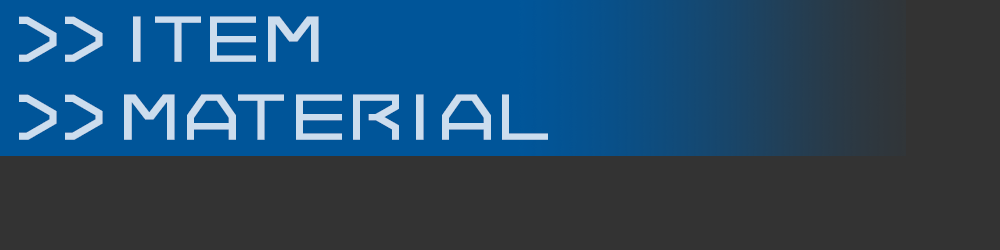
<style>
.page{position:relative;width:1000px;height:250px;background:#333333}
.page>*{position:absolute;margin:0}
.t1{font:65px/78px "7THDR2020ThinRegular";letter-spacing:0.055em;color:#ccddee;text-transform:uppercase}
.t2{font:51px/78px "7THDR2020ThinRegular";letter-spacing:0.105em;color:#ccddee;text-transform:uppercase;font-weight:bold}
.t3{font:51px/78px "7THDR2020ThinRegular";letter-spacing:0.055em;color:#ccddee;text-transform:uppercase;font-weight:bold}
.t4{font:51px/78px "7THDR2020ThinRegular";letter-spacing:0.115em;color:#ccddee;text-transform:uppercase;font-weight:bold}
.t5{font:51px/78px "7THDR2020ThinRegular";letter-spacing:0.055em;color:#ccddee;text-transform:uppercase;font-weight:bold;scale:1.1 1}
.t6{font:51px/78px "7THDR2020ThinRegular";letter-spacing:0.105em;color:#ccddee;text-transform:uppercase;font-weight:bold;scale:1.1 1}
.t7{font:51px/78px "7THDR2020ThinRegular";letter-spacing:-0.075em;color:#ccddee;text-transform:uppercase;font-weight:bold}
.t8{font:51px/78px "7THDR2020ThinRegular";letter-spacing:0.145em;color:#ccddee;text-transform:uppercase;font-weight:bold}
.t9{font:51px/78px "7THDR2020ThinRegular";letter-spacing:0.085em;color:#ccddee;text-transform:uppercase;font-weight:bold}
</style>
<div class="page">
<p class="t1" style="left:19px;top:16px;width:84px;height:124px">&gt;&gt;<br>&gt;&gt;</p>
<p class="t2" style="left:124px;top:16px;width:424px;height:124px"><span class="t3">iT</span><span class="t4">E</span><span class="t5">M<br></span><span class="t6">M</span><span class="t7">a</span>ter<span class="t8">i</span><span class="t9">a</span>l</p>
</div>
